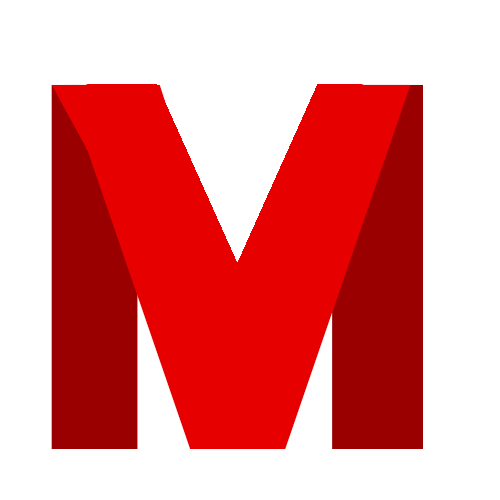
<style>
.page{position:relative;width:500px;height:500px;background:#ffffff}
.page>*{position:absolute;margin:0}
.t1{font:500px "Tahoma-Bold"}
.t2{font:500px "Tahoma-Bold";color:#e60000}
</style>
<div class="page">
<p class="t1" style="left:51px;top:84px;width:372px;height:365px">M</p>
<p class="t2" style="left:65px;top:84px;width:346px;height:365px">V</p>
</div>
